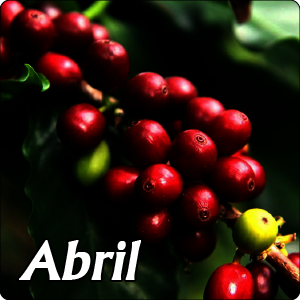
<style>
.page{position:relative;width:300px;height:300px}
.page>*{position:absolute;margin:0}
.t1{font:55.6px "Narkisim";color:#ffffff;font-weight:bold;font-style:italic}
</style>
<div class="page">
<p class="t1" style="left:19px;top:240px;width:122px;height:40px">Abril</p>
</div>
